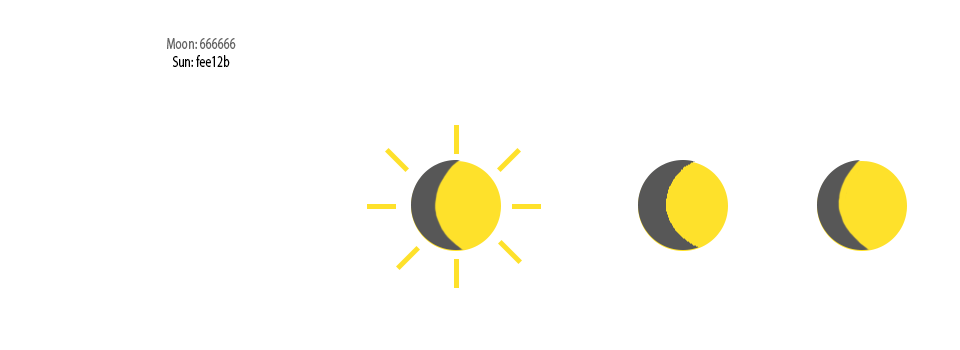
<style>
.page{position:relative;width:960px;height:350px;background:#ffffff}
.page>*{position:absolute;margin:0}
.t1{font:16px "MyriadPro-Regular";letter-spacing:0.02em;color:#666666;scale:0.7 1}
.t2{font:16px "MyriadPro-Regular";letter-spacing:0.02em;color:#000000;scale:0.7 1}
</style>
<div class="page">
<p class="t1" style="left:167px;top:38px;width:69px;height:11px">Moon: 666666</p>
<p class="t2" style="left:172px;top:55px;width:58px;height:12px">Sun: fee12b</p>
</div>
